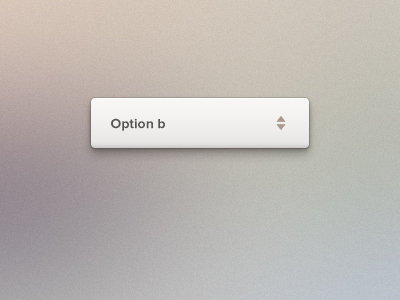
<style>
.page{position:relative;width:400px;height:300px}
.page>*{position:absolute;margin:0}
.t1{font:14px "ProximaNova-Bold";color:#575351}
</style>
<div class="page">
<p class="t1" style="left:111px;top:118px;width:54px;height:13px">Option b</p>
</div>
